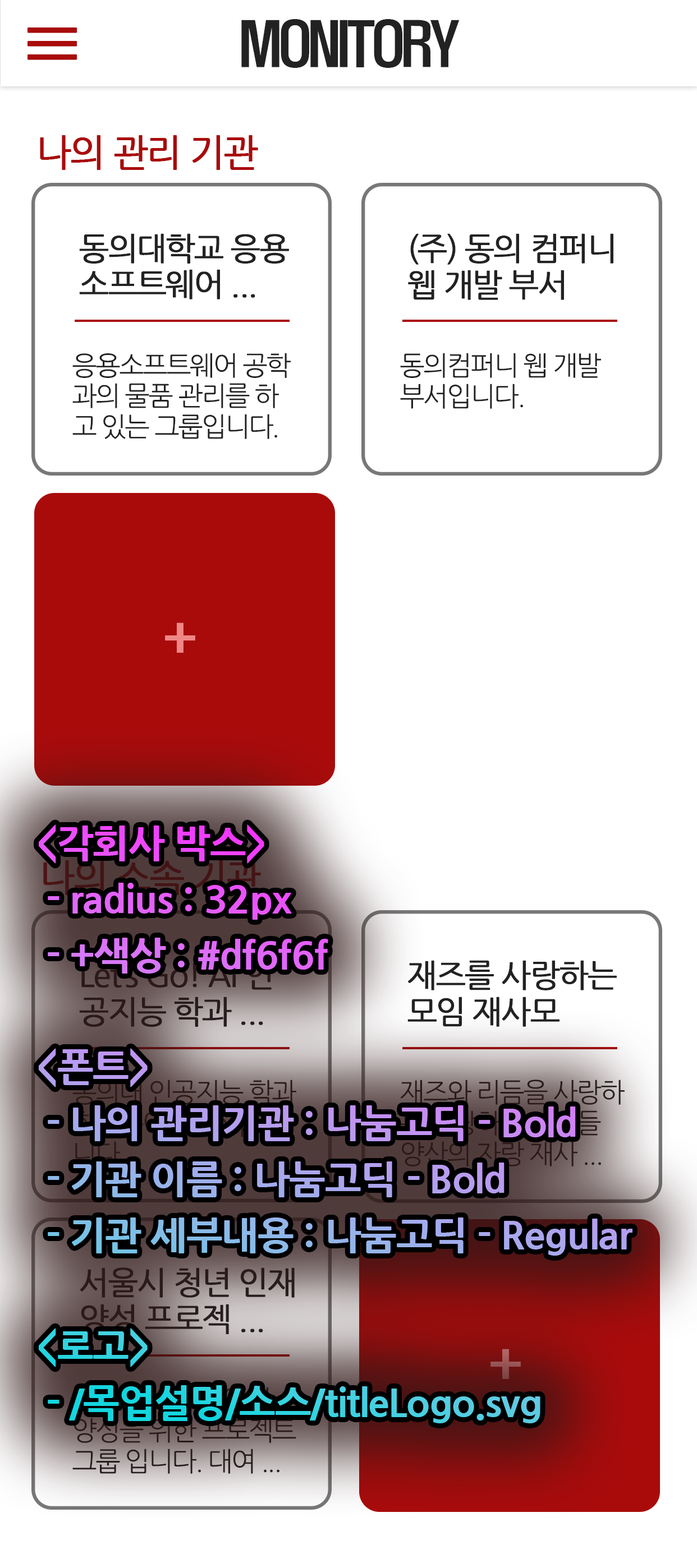
<style>
.page{position:relative;width:697px;height:1568px;background:#ffffff}
.page>*{position:absolute;margin:0}
.t1{font:53.9px "NanumGothic";letter-spacing:-0.02em;color:#a90b0b;font-weight:bold}
.t2{font:55.5px "H2hdrM";letter-spacing:-0.06em;color:#222222}
.t3{font:37px "NanumGothic";letter-spacing:-0.06em;color:#a90b0b;font-weight:bold}
.t4{font:31.7px/36.4px "NanumGothic";letter-spacing:-0.06em;color:#222222;font-weight:bold}
.t5{font:26.8px/30.7px "NanumGothic";letter-spacing:-0.06em;color:#222222}
.t6{font:26.8px/30.8px "NanumGothic";letter-spacing:-0.06em;color:#222222}
.t7{font:59.6px "H2hdrM";letter-spacing:-0.06em;color:#ef8787}
.t8{font:38.7px/55.9px "NanumGothicExtraBold";letter-spacing:-0.02em}
.t9{font:37px "NanumGothic";letter-spacing:-0.06em;color:#431414;font-weight:bold}
.t10{font:59.6px "H2hdrM";letter-spacing:-0.06em;color:#995454}
</style>
<div class="page">
<p class="t1" style="left:27px;top:27px;width:50px;height:33px;rotate:90deg">|||</p>
<p class="t2" style="left:241px;top:19px;width:218px;height:49px">MONITORY</p>
<p class="t3" style="left:40px;top:135px;width:218px;height:35px">나의 관리 기관</p>
<p class="t4" style="left:79px;top:233px;width:210px;height:66px">동의대학교 응용<br>소프트웨어 ...</p>
<p class="t4" style="left:408px;top:233px;width:205px;height:67px">(주) 동의 컴퍼니<br>웹 개발 부서</p>
<p class="t5" style="left:72px;top:353px;width:218px;height:86px">응용소프트웨어 공학<br>과의 물품 관리를 하<br>고 있는 그룹입니다.</p>
<p class="t6" style="left:400px;top:353px;width:201px;height:56px">동의컴퍼니 웹 개발<br>부서입니다.</p>
<p class="t7" style="left:165px;top:622px;width:30px;height:31px">+</p>
<p class="t8" style="left:39px;top:824px;width:593px;height:599px">&lt;각회사 박스&gt;<br> - radius : 32px<br> - +색상 : #df6f6f<br><br>&lt;폰트&gt;<br> - 나의 관리기관 : 나눔고딕 - Bold<br> - 기관 이름 : 나눔고딕 - Bold<br> - 기관 세부내용 : 나눔고딕 - Regular<br><br>&lt;로고&gt;<br> - /목업설명/소스/titleLogo.svg</p>
<p class="t9" style="left:43px;top:860px;width:218px;height:35px">나의 소속 기관</p>
<p class="t4" style="left:79px;top:960px;width:192px;height:67px">Let’s Go! AI 인<br>공지능 학과 ...</p>
<p class="t4" style="left:407px;top:960px;width:209px;height:67px">재즈를 사랑하는<br>모임 재사모</p>
<p class="t4" style="left:80px;top:1267px;width:214px;height:67px">서울시 청년 인재<br>양성 프로젝 ...</p>
<p class="t10" style="left:490px;top:1349px;width:30px;height:30px">+</p>
</div>
